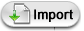
<style>
.page{position:relative;width:84px;height:31px}
.page>*{position:absolute;margin:0}
.t1{font:13.3px "ArialMT";color:#000000;font-weight:bold}
</style>
<div class="page">
<p class="t1" style="left:34px;top:9px;width:39px;height:13px">Import</p>
</div>
